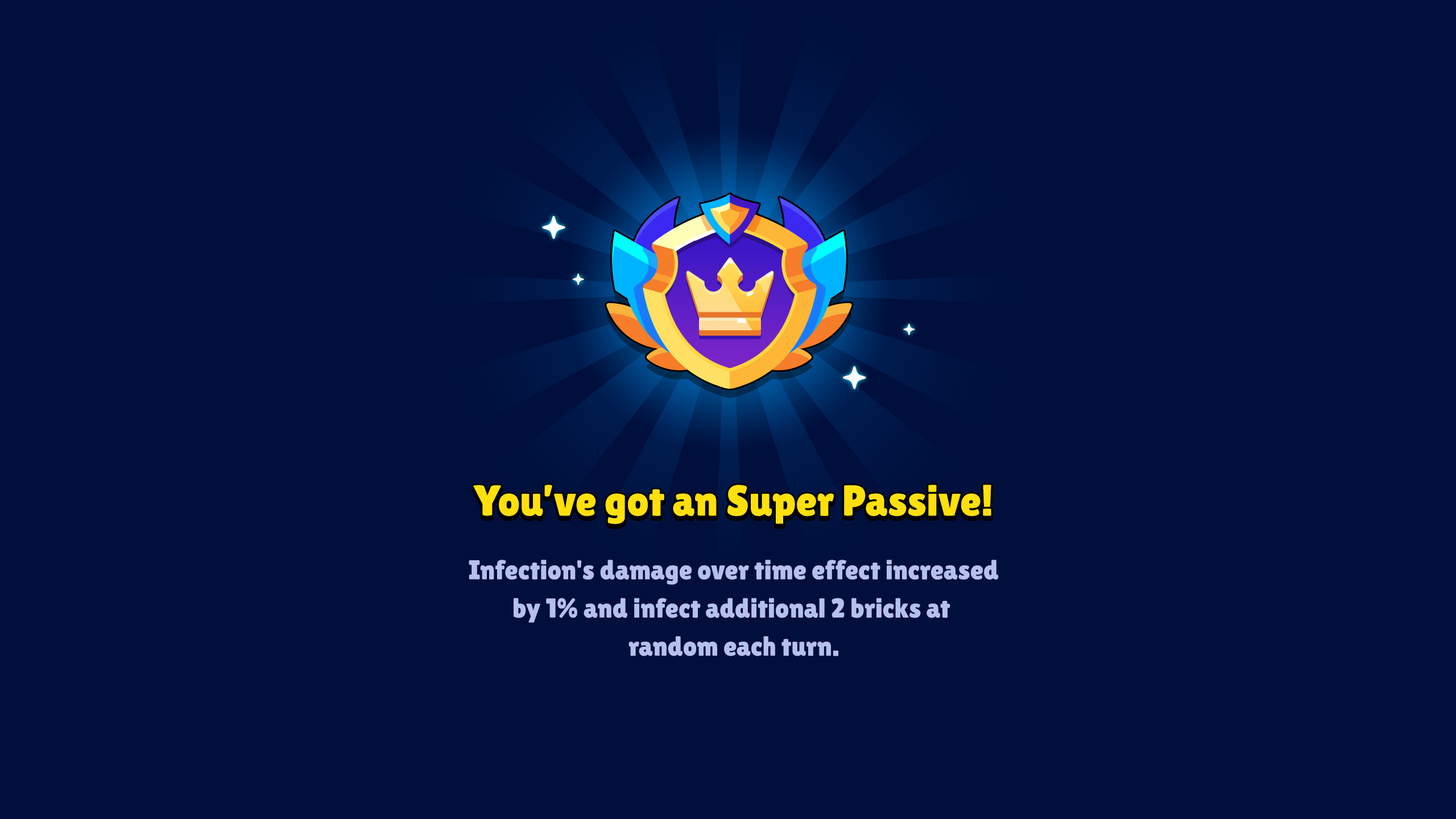
<style>
.page{position:relative;width:1456px;height:819px;background:#000f3b}
.page>*{position:absolute;margin:0}
.t1{font:43.2px "LilitaOne";color:#ffe00d}
.t2{font:27.3px/38.2px "LilitaOne";color:#b6bfee}
</style>
<div class="page">
<p class="t1" style="left:473px;top:485px;width:518px;height:39px">You’ve got an Super Passive!</p>
<p class="t2" style="left:469px;top:560px;width:530px;height:96px;text-align:center">Infection's damage over time effect increased<br>by 1% and infect additional 2 bricks at <br>random each turn.</p>
</div>
